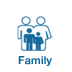
<style>
.page{position:relative;width:72px;height:72px;background:#ffffff}
.page>*{position:absolute;margin:0}
.t1{font:11px "HelveticaNeue-Bold";color:#12679b}
</style>
<div class="page">
<p class="t1" style="left:18px;top:56px;width:34px;height:10px">Family</p>
</div>
